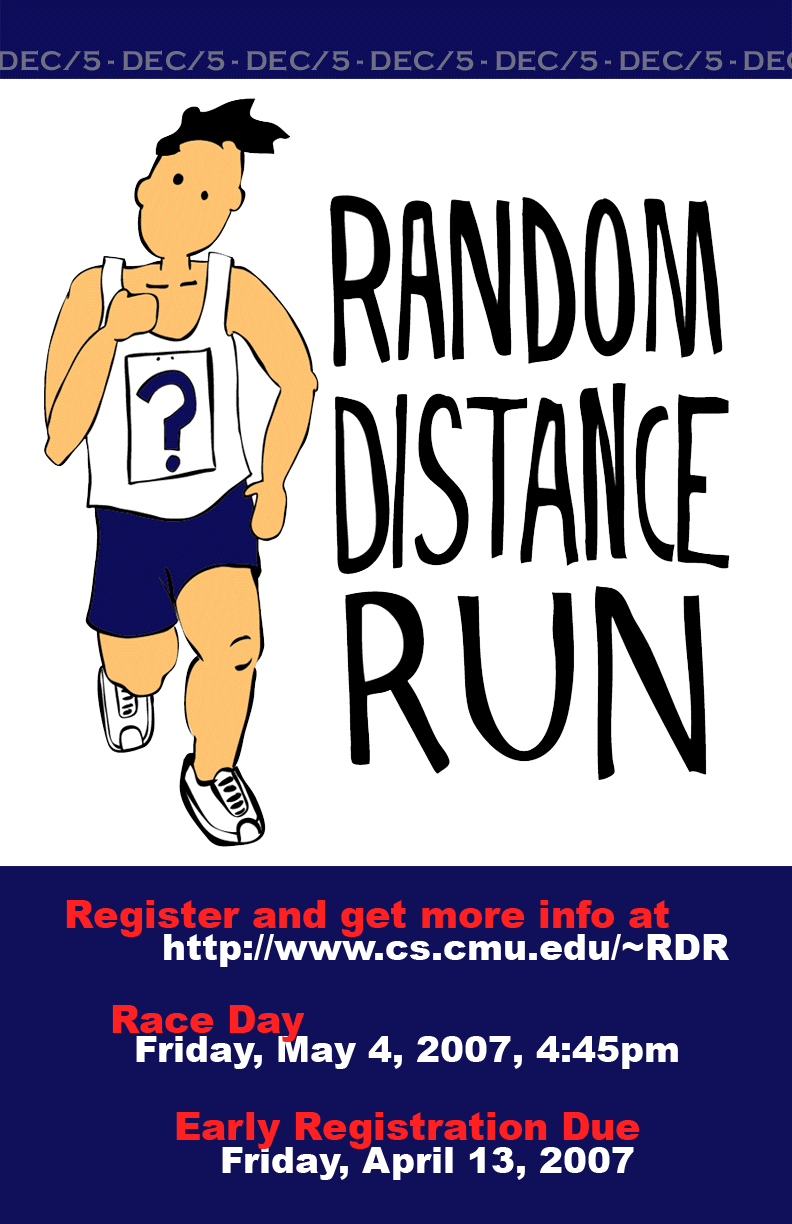
<style>
.page{position:relative;width:792px;height:1224px;background:#ffffff}
.page>*{position:absolute;margin:0}
.t1{font:37.9px "Arial-Black";color:#ff2121}
.t2{font:35.9px "Arial-Black";color:#ffffff}
</style>
<div class="page">
<p class="t1" style="left:66px;top:900px;width:603px;height:37px">Register and get more info at</p>
<p class="t2" style="left:164px;top:934px;width:565px;height:33px">http://www.cs.cmu.edu/~RDR</p>
<p class="t1" style="left:112px;top:1005px;width:193px;height:37px">Race Day</p>
<p class="t2" style="left:136px;top:1036px;width:542px;height:33px">Friday, May 4, 2007, 4:45pm</p>
<p class="t1" style="left:176px;top:1112px;width:464px;height:37px">Early Registration Due</p>
<p class="t2" style="left:222px;top:1147px;width:412px;height:33px">Friday, April 13, 2007</p>
</div>
